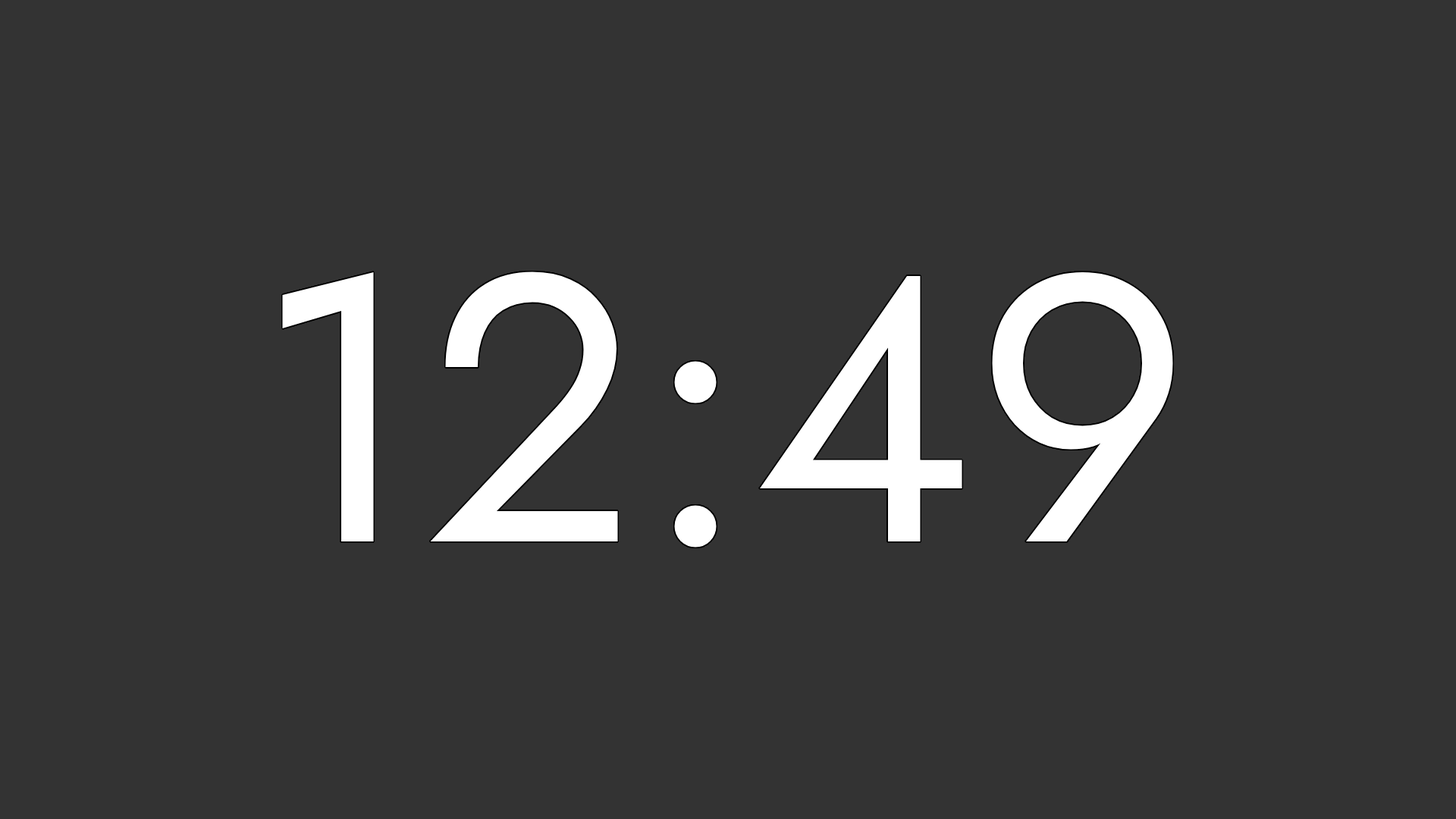
<style>
.page{position:relative;width:1456px;height:819px;background:#333333}
.page>*{position:absolute;margin:0}
.t1{font:379.2px "Jost-Regular";color:#ffffff}
</style>
<div class="page">
<p class="t1" style="left:282px;top:271px;width:891px;height:277px">12:49</p>
</div>
